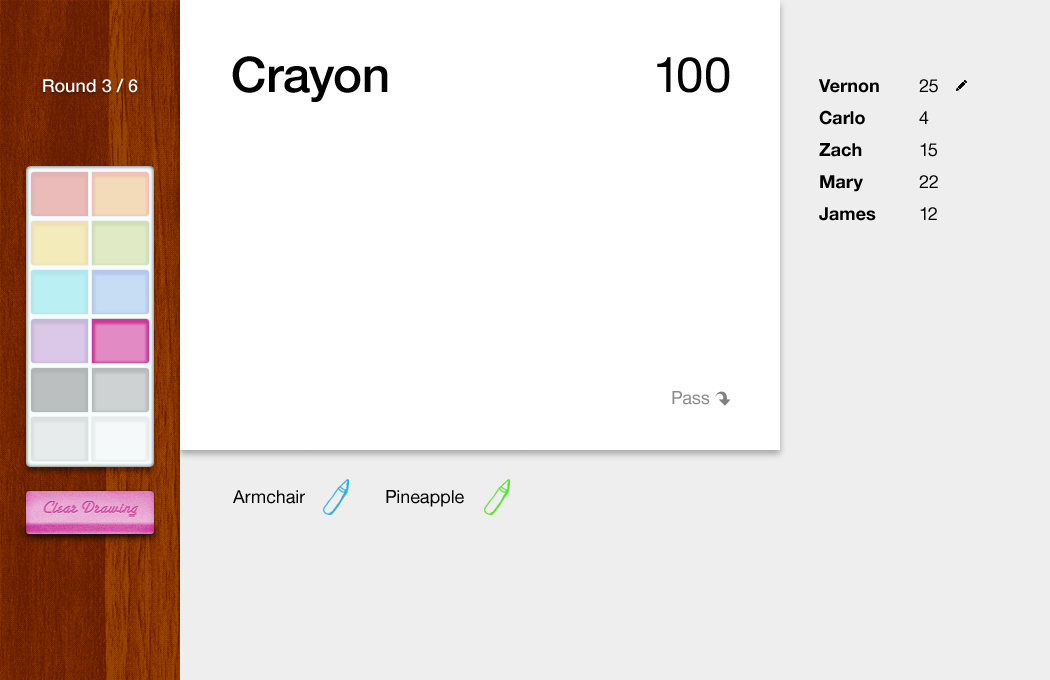
<style>
.page{position:relative;width:1050px;height:680px;background:#eeeeee}
.page>*{position:absolute;margin:0}
.t1{font:49px "HelveticaNeue-Medium";color:#000000}
.t2{font:49px "HelveticaNeue";color:#000000}
.t3{font:18px "HelveticaNeue-Medium";color:#ffffff}
.t4{font:18px/32px "HelveticaNeue-Bold";color:#000000}
.t5{font:18px/32px "HelveticaNeue";color:#000000}
.t6{font:18px "HelveticaNeue";color:#8c8c8c}
.t7{font:18px "HelveticaNeue";color:#000000}
</style>
<div class="page">
<p class="t1" style="left:232px;top:56px;width:156px;height:46px">Crayon</p>
<p class="t2" style="left:657px;top:57px;width:73px;height:36px">100</p>
<p class="t3" style="left:43px;top:78px;width:95px;height:15px">Round 3 / 6</p>
<p class="t4" style="left:818px;top:79px;width:61px;height:142px">Vernon<br>Carlo<br>Zach<br>Mary<br>James</p>
<p class="t5" style="left:919px;top:79px;width:19px;height:141px">25<br>4<br>15<br>22<br>12</p>
<p class="t6" style="left:672px;top:391px;width:38px;height:14px">Pass</p>
<p class="t7" style="left:233px;top:490px;width:72px;height:14px">Armchair</p>
<p class="t7" style="left:386px;top:490px;width:78px;height:17px">Pineapple</p>
</div>
